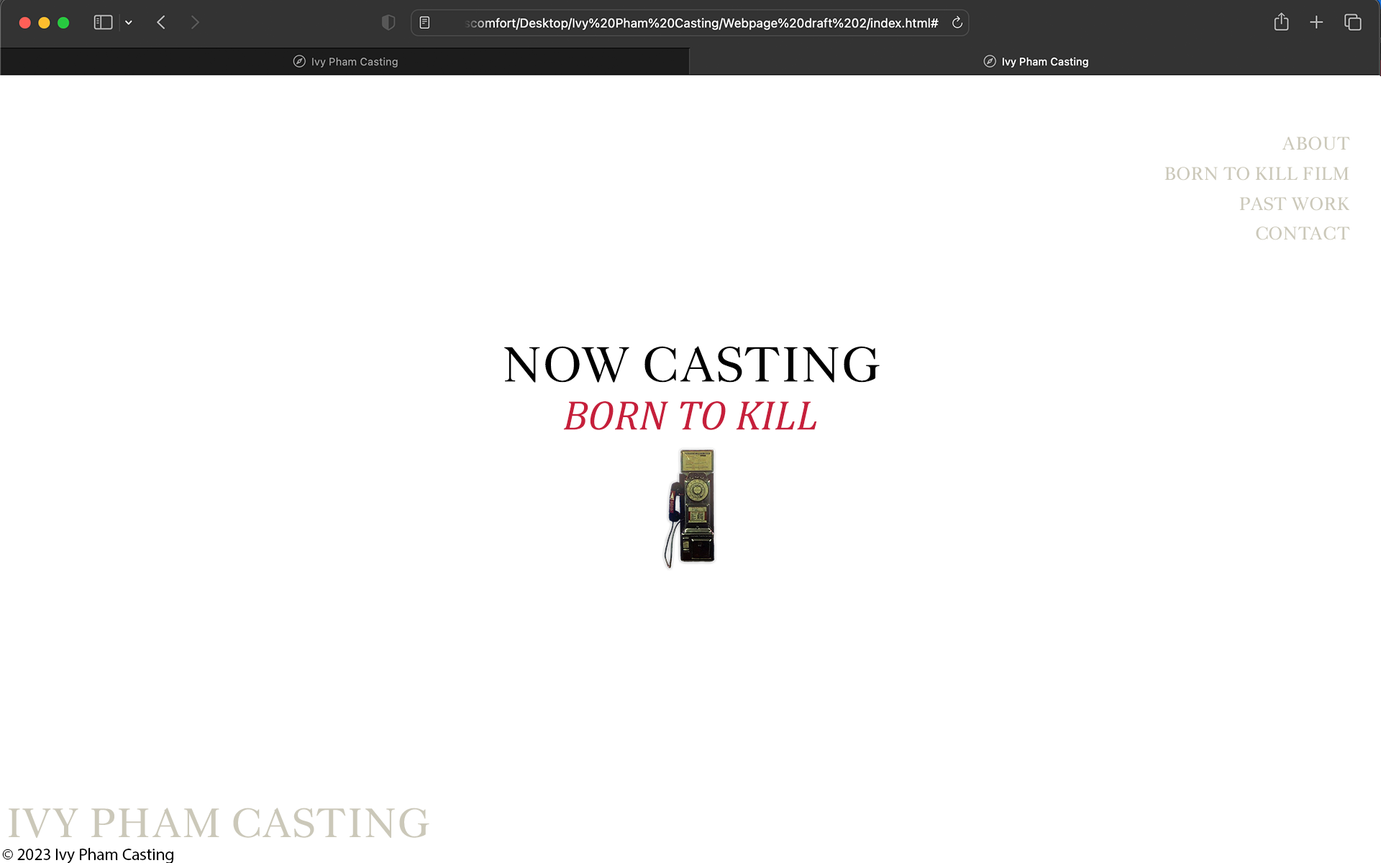
<style>
.page{position:relative;width:1381px;height:863px;background:#ffffff}
.page>*{position:absolute;margin:0}
.t1{font:18px/30px "ZagolovochnayaW01-Book";color:#cbc8b9}
.t2{font:42px/48px "Cambria-Italic";color:#c61f3b}
.t3{font:49.1px "ZagolovochnayaW01-Book";color:#000000}
.t4{font:40.8px "ZagolovochnayaW01-Book";color:#cbc8b9}
.t5{font:16.9px "MyriadPro-Regular";color:#000000}
</style>
<div class="page">
<p class="t1" style="left:1165px;top:137px;width:185px;height:103px;text-align:right">ABOUT<br>BORN TO KILL FILM<br>PAST WORK<br>CONTACT</p>
<p class="t2" style="left:504px;top:346px;width:376px;height:84px;text-align:center"><span class="t3">NOW CASTING<br></span>BORN TO KILL</p>
<p class="t4" style="left:8px;top:808px;width:421px;height:31px">IVY PHAM CASTING</p>
<p class="t5" style="left:2px;top:848px;width:171px;height:16px">© 2023 Ivy Pham Casting</p>
</div>
